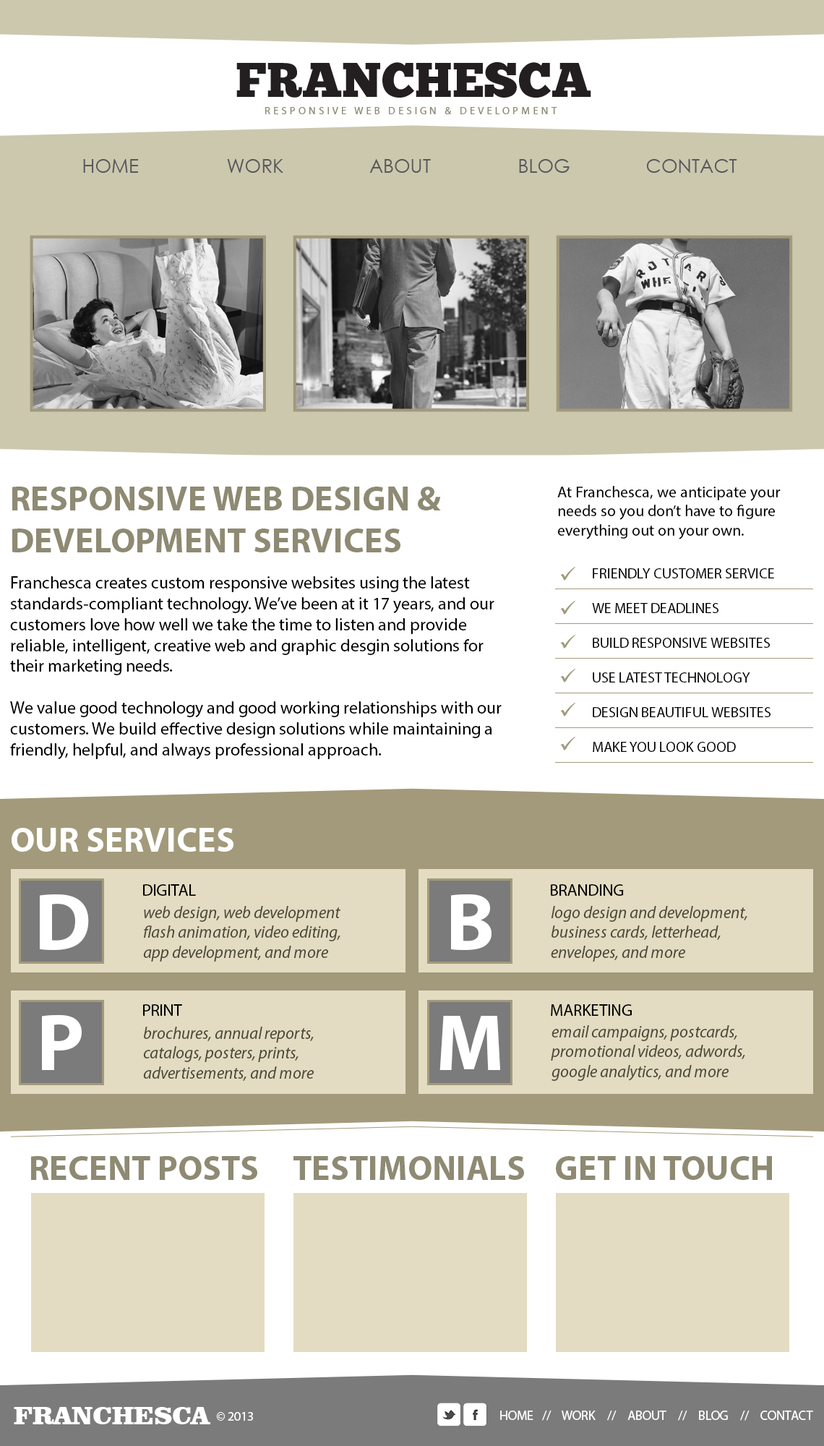
<style>
.page{position:relative;width:824px;height:1446px;background:#ffffff}
.page>*{position:absolute;margin:0}
.t1{font:10.1px "MyriadWebPro";letter-spacing:0.3em;color:#8e8a73}
.t2{font:15.9px "MyriadPro-Regular";color:#000000}
.t3{font:34.7px "MyriadPro-Bold";color:#8e8a73}
.t4{font:14.5px/34.7px "MyriadPro-Regular";color:#000000}
.t5{font:14.5px "MyriadPro-Regular";color:#000000}
.t6{font:17.4px "MyriadPro-Regular";color:#010101}
.t7{font:34.7px "MyriadPro-Bold";color:#ffffff}
.t8{font:16.6px "MyriadPro-Regular";color:#000000;text-transform:uppercase}
.t9{font:81px "MyriadPro-Bold";color:#ffffff}
.t10{font:16.6px "MyriadPro-It";color:#4f4b3b}
.t11{font:26px "ClarendonBT-Black";color:#ffffff}
.t12{font:13px "MyriadPro-Regular";color:#ffffff}
</style>
<div class="page">
<p class="t1" style="left:265px;top:107px;width:293px;height:7px">RESPONSIVE WEB DESIGN &amp; DEVELOPMENT</p>
<p class="t2" style="left:558px;top:486px;width:223px;height:53px">At Franchesca, we anticipate your needs so you don’t have to figure everything out on your own.</p>
<p class="t3" style="left:12px;top:487px;width:429px;height:66px">RESPONSIVE WEB DESIGN &amp; DEVELOPMENT SERVICES</p>
<p class="t4" style="left:592px;top:568px;width:183px;height:184px"><span class="t5"><br></span>FRIENDLY CUSTOMER SERVICE<br>WE MEET DEADLINES<br>BUILD RESPONSIVE WEBSITES<br>USE LATEST TECHNOLOGY<br>DESIGN BEAUTIFUL WEBSITES<br>MAKE YOU LOOK GOOD</p>
<p class="t6" style="left:10px;top:576px;width:492px;height:183px">Franchesca creates custom responsive websites using the latest standards-compliant technology. We’ve been at it 17 years, and our customers love how well we take the time to listen and provide reliable, intelligent, creative web and graphic desgin solutions for their marketing needs.<br><br>We value good technology and good working relationships with our customers. We build effective design solutions while maintaining a friendly, helpful, and always professional approach.</p>
<p class="t7" style="left:12px;top:828px;width:222px;height:24px">OUR SERVICES</p>
<p class="t8" style="left:143px;top:884px;width:53px;height:12px">digital</p>
<p class="t8" style="left:551px;top:884px;width:73px;height:12px">Branding</p>
<p class="t9" style="left:40px;top:895px;width:49px;height:55px">D</p>
<p class="t9" style="left:451px;top:895px;width:41px;height:55px">B</p>
<p class="t10" style="left:143px;top:906px;width:198px;height:56px">web design, web development<br>flash animation, video editing, <br>app development, and more</p>
<p class="t10" style="left:551px;top:906px;width:197px;height:56px">logo design and development,<br>business cards, letterhead, <br>envelopes, and more</p>
<p class="t8" style="left:143px;top:1005px;width:39px;height:11px">Print</p>
<p class="t8" style="left:551px;top:1005px;width:81px;height:11px">Marketing</p>
<p class="t9" style="left:42px;top:1015px;width:40px;height:55px">P</p>
<p class="t9" style="left:440px;top:1016px;width:60px;height:54px">M</p>
<p class="t10" style="left:551px;top:1025px;width:195px;height:56px">email campaigns, postcards,<br>promotional videos, adwords,<br>google analytics, and more</p>
<p class="t10" style="left:143px;top:1027px;width:171px;height:54px">brochures, annual reports,<br>catalogs, posters, prints,<br>advertisements, and more</p>
<p class="t3" style="left:31px;top:1156px;width:226px;height:24px">RECENT POSTS</p>
<p class="t3" style="left:294px;top:1156px;width:230px;height:24px">TESTIMONIALS</p>
<p class="t3" style="left:556px;top:1156px;width:216px;height:24px">GET IN TOUCH</p>
<p class="t11" style="left:14px;top:1407px;width:196px;height:18px">FRANCHESCA</p>
<p class="t12" style="left:216px;top:1412px;width:37px;height:9px">© 2013</p>
<p class="t12" style="left:500px;top:1411px;width:314px;height:10px">HOME   //    WORK    //    ABOUT    //    BLOG    //    CONTACT</p>
</div>
